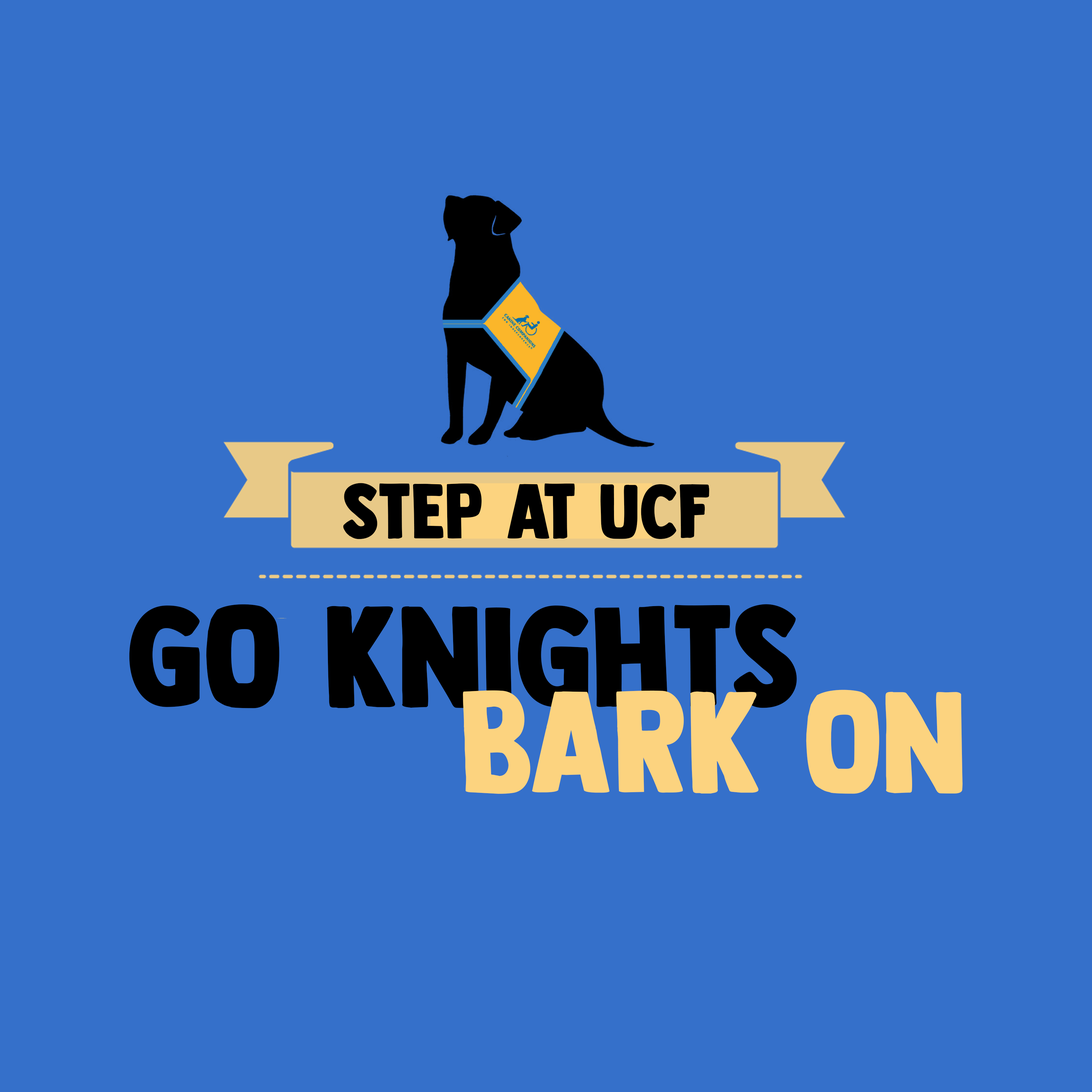
<style>
.page{position:relative;width:1092px;height:1092px;background:#3570ca}
.page>*{position:absolute;margin:0}
.t1{font:78.2px "DKLongreach-Regular";letter-spacing:0.005em;color:#000000;text-transform:uppercase}
.t2{font:144.7px "DKLongreach-Regular";letter-spacing:0.005em;color:#000000;text-transform:uppercase}
.t3{font:144.7px "DKLongreach-Regular";letter-spacing:0.005em;color:#fcd37f;text-transform:uppercase}
</style>
<div class="page">
<p class="t1" style="left:343px;top:483px;width:366px;height:56px">STEP at UCF</p>
<p class="t2" style="left:129px;top:604px;width:668px;height:104px">Go Knights</p>
<p class="t3" style="left:463px;top:690px;width:500px;height:104px">bark on</p>
</div>
